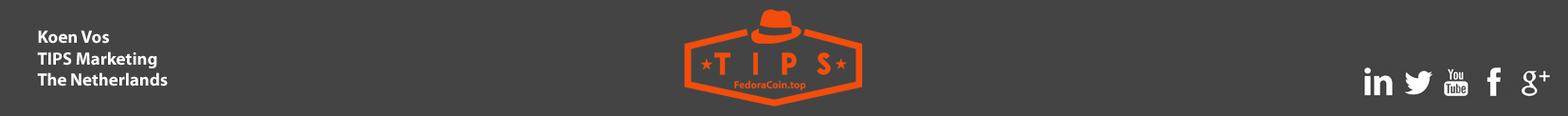
<style>
.page{position:relative;width:1568px;height:116px;background:#444444}
.page>*{position:absolute;margin:0}
.t1{font:17.8px "MyriadPro-Bold";color:#ffffff}
</style>
<div class="page">
<p class="t1" style="left:37px;top:30px;width:131px;height:56px">Koen Vos<br>TIPS Marketing<br>The Netherlands</p>
</div>
